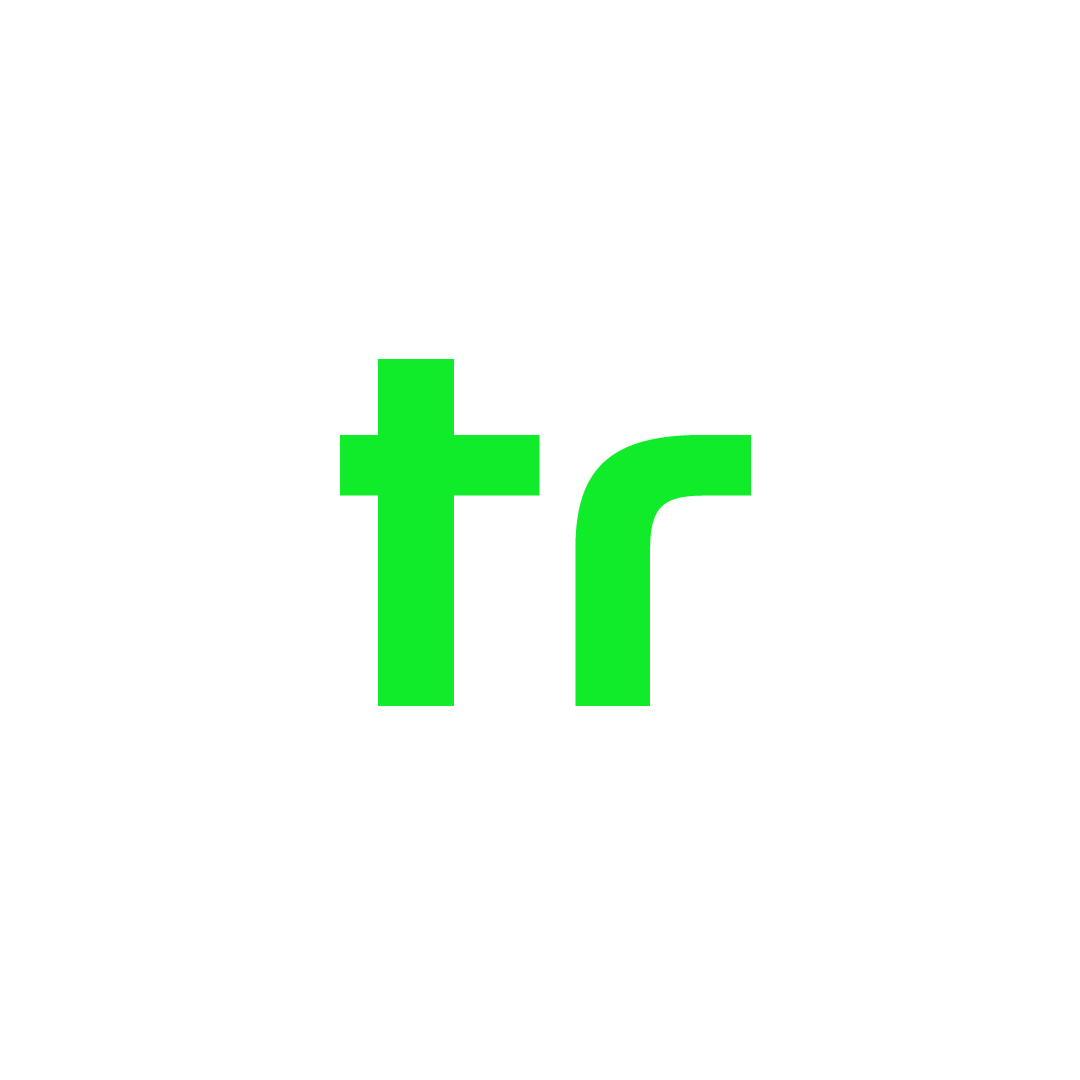
<style>
.page{position:relative;width:1080px;height:1080px;background:#ffffff}
.page>*{position:absolute;margin:0}
.t1{font:500px "NeuropoliticalRg-Regular";color:#10ec2a}
</style>
<div class="page">
<p class="t1" style="left:340px;top:359px;width:411px;height:347px">tr</p>
</div>
